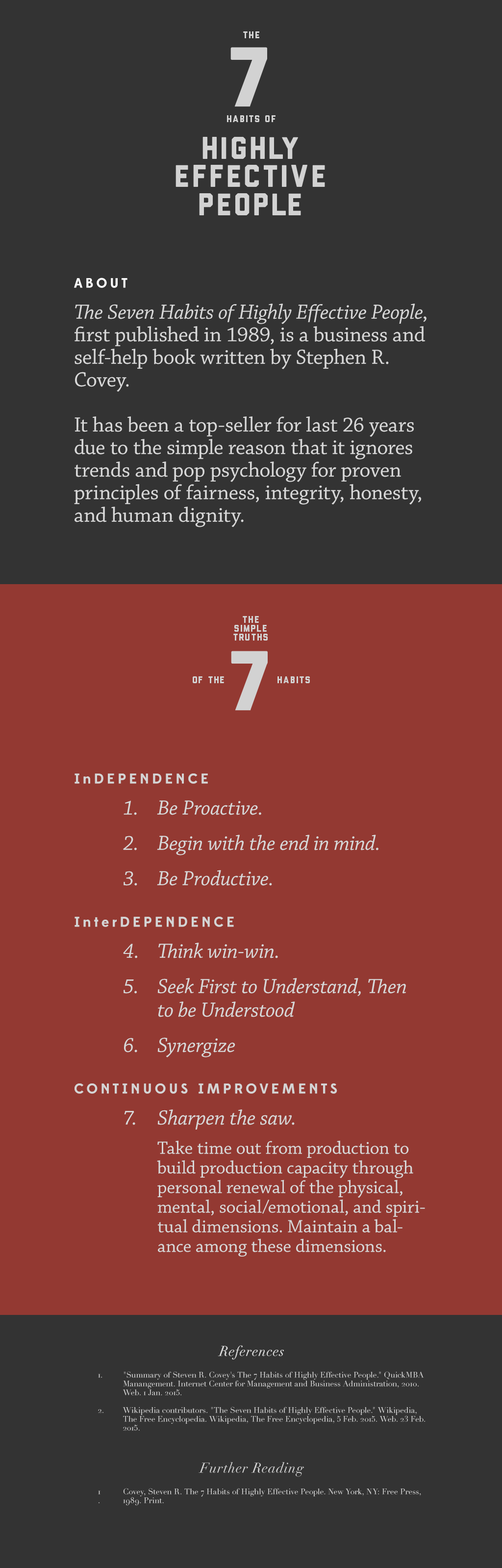
<style>
.page{position:relative;width:502px;height:1568px;background:#333333}
.page>*{position:absolute;margin:0}
.t1{font:13.7px "Edmondsans-Bold";letter-spacing:0.2em;color:#ffffff}
.t2{font:21.6px/22.6px "ChaparralPro-Regular";color:#d8d8d8}
.t3{font:21.6px/22.6px "ChaparralPro-Italic";color:#d8d8d8}
.t4{font:14.3px "Edmondsans-Bold";letter-spacing:0.2em;color:#d5d5d5}
.t5{font:21.6px/35.3px "ChaparralPro-Italic";color:#d8d8d8}
.t6{font:21.6px/23.5px "ChaparralPro-Italic";color:#d8d8d8}
.t7{font:21.6px "ChaparralPro-Italic";color:#d8d8d8}
.t8{font:18.6px/19.6px "ChaparralPro-Regular";color:#d8d8d8}
.t9{font:13.7px "Didot-Italic";letter-spacing:0.05em;color:#d5d5d5}
.t10{font:7.8px/8.8px "Didot";color:#d5d5d5}
</style>
<div class="page">
<p class="t1" style="left:74px;top:278px;width:54px;height:10px">ABOUT</p>
<p class="t2" style="left:74px;top:304px;width:353px;height:223px"><span class="t3">The Seven Habits of Highly Effective People</span>, first published in 1989, is a business and self-help book written by Stephen R. Covey.<br><br>It has been a top-seller for last 26 years due to the simple reason that it ignores trends and pop psychology for proven principles of fairness, integrity, honesty, and human dignity.</p>
<p class="t4" style="left:75px;top:773px;width:133px;height:11px">InDEPENDENCE</p>
<p class="t5" style="left:123px;top:800px;width:14px;height:86px">1.<br>2.<br>3.</p>
<p class="t5" style="left:157px;top:800px;width:222px;height:86px">Be Proactive.<br>Begin with the end in mind.<br>Be Productive.</p>
<p class="t4" style="left:75px;top:917px;width:159px;height:10px">InterDEPENDENCE</p>
<p class="t5" style="left:123px;top:944px;width:14px;height:109px">4.<br>5.<br><br>6.</p>
<p class="t5" style="left:157px;top:943px;width:249px;height:114px">Think win-win.<br>Seek First to Understand, Then <span class="t6">to be Understood<br></span>Synergize</p>
<p class="t4" style="left:75px;top:1083px;width:262px;height:11px">CONTINUOUS IMPROVEMENTS</p>
<p class="t7" style="left:157px;top:1109px;width:138px;height:21px">Sharpen the saw.</p>
<p class="t7" style="left:124px;top:1111px;width:11px;height:14px">7.</p>
<p class="t8" style="left:157px;top:1140px;width:268px;height:117px">Take time out from production to build production capacity through personal renewal of the physical, mental, social/emotional, and spiritual dimensions. Maintain a balance among these dimensions.</p>
<p class="t9" style="left:218px;top:1345px;width:66px;height:15px">References</p>
<p class="t9" style="left:218px;top:1345px;width:66px;height:15px">References</p>
<p class="t10" style="left:98px;top:1374px;width:5px;height:39px">1.<br><br><br><br>2.</p>
<p class="t10" style="left:123px;top:1371px;width:302px;height:60px">"Summary of Steven R. Covey's The 7 Habits of Highly Effective People." QuickMBA Manangement. Internet Center for Management and Business Administration, 2010. Web. 1 Jan. 2015.<br><br>Wikipedia contributors. "The Seven Habits of Highly Effective People." Wikipedia, The Free Encyclopedia. Wikipedia, The Free Encyclopedia, 5 Feb. 2015. Web. 23 Feb. 2015.</p>
<p class="t9" style="left:199px;top:1462px;width:105px;height:15px">Further Reading</p>
<p class="t10" style="left:98px;top:1491px;width:3px;height:12px">1<br>.</p>
<p class="t10" style="left:123px;top:1488px;width:298px;height:18px">Covey, Steven R. The 7 Habits of Highly Effective People. New York, NY: Free Press, 1989. Print.</p>
</div>
